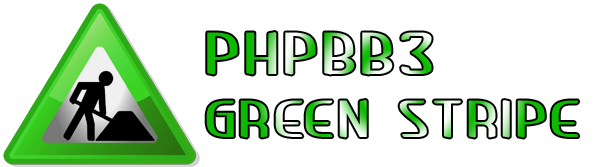
<style>
.page{position:relative;width:600px;height:167px;background:#ffffff}
.page>*{position:absolute;margin:0}
.t1{font:52.3px "ft19-CondensedRegular";letter-spacing:0.025em;scale:1.53 1}
.t2{font:59.3px "ft19-CondensedRegular";letter-spacing:0.025em;scale:1.53 1}
</style>
<div class="page">
<p class="t1" style="left:206px;top:32px;width:373px;height:106px"><span class="t2">phpbb3<br></span>GREEN Stripe</p>
</div>
